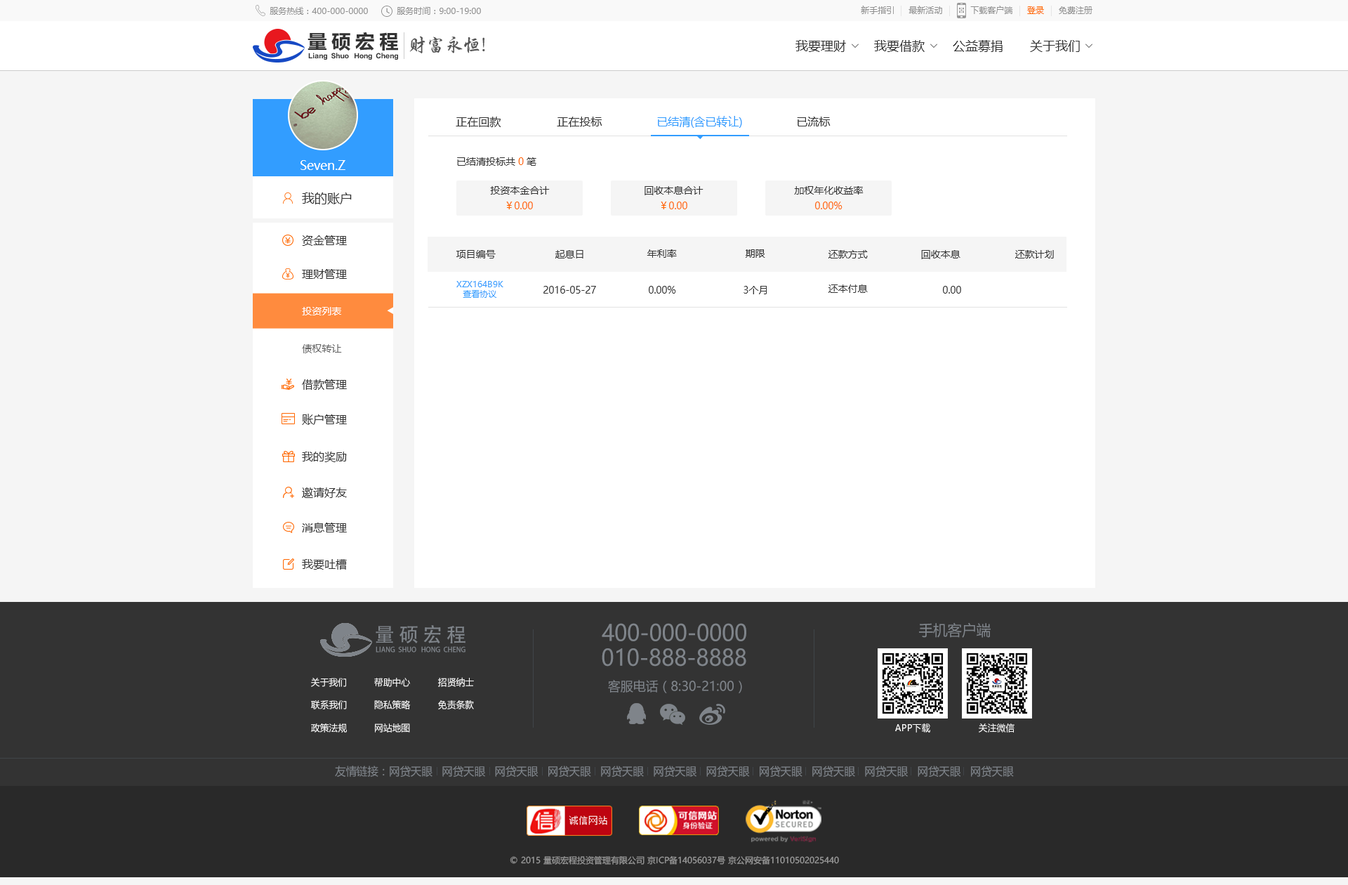
<style>
.page{position:relative;width:1348px;height:885px;background:#ffffff}
.page>*{position:absolute;margin:0}
.t1{font:8.4px "MicrosoftYaHei";color:#909090}
.t2{font:8.4px "MicrosoftYaHei";color:#ff6803}
.t3{font:20px "FZLTCHJW--GB1-0";letter-spacing:0.2em;color:#333333}
.t4{font:18.7px "Tensentype-BoDangXingKaiJ";color:#555555;scale:0.96 1}
.t5{font:12.6px "MicrosoftYaHei";color:#333333}
.t6{font:6.3px "FZLTDHK--GBK1-0";color:#333333;scale:0.96 1}
.t7{font:11.2px "MicrosoftYaHei";color:#333333}
.t8{font:11.2px "MicrosoftYaHei";color:#329dff}
.t9{font:12.6px "MicrosoftYaHei";color:#ffffff}
.t10{font:9.8px "MicrosoftYaHei";color:#333333}
.t11{font:9.8px "MicrosoftYaHei";color:#ff6803}
.t12{font:8.4px/9.8px "MicrosoftYaHei";color:#329dff}
.t13{font:9.8px "MicrosoftYaHei";color:#ffffff}
.t14{font:9.8px "MicrosoftYaHei";color:#646464}
.t15{font:20px "AdobeHeitiStd-Regular";letter-spacing:0.2em;color:#7f848a}
.t16{font:22.4px "MicrosoftYaHei";color:#7f848a;scale:0.96 1}
.t17{font:14.9px "MicrosoftYaHei";color:#7f848a;scale:0.96 1}
.t18{font:7.1px "AdobeHeitiStd-Regular";color:#7f848a;text-transform:uppercase;scale:0.96 1}
.t19{font:9.3px "MicrosoftYaHei";color:#ffffff;scale:0.96 1}
.t20{font:13.1px "MicrosoftYaHei";color:#7f848a;scale:0.96 1}
.t21{font:11.2px "MicrosoftYaHei";color:#7f848a;scale:0.96 1}
.t22{font:8.4px "MicrosoftYaHei";color:#999999}
</style>
<div class="page">
<p class="t1" style="left:861px;top:6px;width:33px;height:8px">新手指引</p>
<p class="t1" style="left:908px;top:6px;width:34px;height:8px">最新活动</p>
<p class="t1" style="left:970px;top:6px;width:43px;height:8px">下载客户端</p>
<p class="t1" style="left:270px;top:7px;width:98px;height:8px">服务热线：400-000-0000</p>
<p class="t1" style="left:397px;top:7px;width:84px;height:8px">服务时间：9:00-19:00</p>
<p class="t2" style="left:1027px;top:6px;width:17px;height:8px">登录</p>
<p class="t1" style="left:1059px;top:6px;width:33px;height:8px">免费注册</p>
<p class="t3" style="left:308px;top:32px;width:90px;height:19px">量硕宏程</p>
<p class="t4" style="left:409px;top:36px;width:76px;height:17px">财富永恒!</p>
<p class="t5" style="left:795px;top:40px;width:51px;height:12px">我要理财</p>
<p class="t5" style="left:874px;top:40px;width:51px;height:12px">我要借款</p>
<p class="t5" style="left:953px;top:40px;width:50px;height:12px">公益募捐</p>
<p class="t5" style="left:1030px;top:40px;width:50px;height:12px">关于我们</p>
<p class="t6" style="left:308px;top:53px;width:90px;height:7px">Liang  Shuo   Hong  Cheng</p>
<p class="t7" style="left:456px;top:117px;width:45px;height:10px">正在回款</p>
<p class="t7" style="left:557px;top:117px;width:45px;height:10px">正在投标</p>
<p class="t8" style="left:657px;top:116px;width:85px;height:12px">已结清(含已转让)</p>
<p class="t7" style="left:797px;top:117px;width:34px;height:9px">已流标</p>
<p class="t9" style="left:300px;top:160px;width:45px;height:10px">Seven.Z</p>
<p class="t10" style="left:457px;top:157px;width:79px;height:9px">已结清投标共 <span class="t11">0</span> 笔</p>
<p class="t5" style="left:302px;top:192px;width:50px;height:12px">我的账户</p>
<p class="t10" style="left:490px;top:186px;width:60px;height:8px">投资本金合计</p>
<p class="t10" style="left:645px;top:186px;width:58px;height:9px">回收本息合计</p>
<p class="t10" style="left:794px;top:186px;width:70px;height:8px">加权年化收益率</p>
<p class="t11" style="left:506px;top:201px;width:27px;height:8px">￥0.00</p>
<p class="t11" style="left:661px;top:201px;width:26px;height:8px">￥0.00</p>
<p class="t11" style="left:815px;top:201px;width:27px;height:8px">0.00%</p>
<p class="t7" style="left:302px;top:235px;width:45px;height:11px">资金管理</p>
<p class="t10" style="left:456px;top:250px;width:40px;height:8px">项目编号</p>
<p class="t10" style="left:555px;top:250px;width:28px;height:8px">起息日</p>
<p class="t10" style="left:647px;top:249px;width:30px;height:9px">年利率</p>
<p class="t10" style="left:746px;top:249px;width:19px;height:9px">期限</p>
<p class="t10" style="left:828px;top:250px;width:40px;height:8px">还款方式</p>
<p class="t10" style="left:921px;top:250px;width:39px;height:9px">回收本息</p>
<p class="t10" style="left:1015px;top:250px;width:39px;height:8px">还款计划</p>
<p class="t7" style="left:302px;top:269px;width:45px;height:10px">理财管理</p>
<p class="t12" style="left:456px;top:281px;width:47px;height:17px;text-align:center">XZX164B9K<br>查看协议</p>
<p class="t10" style="left:543px;top:286px;width:53px;height:7px">2016-05-27</p>
<p class="t10" style="left:649px;top:286px;width:27px;height:7px">0.00%</p>
<p class="t10" style="left:743px;top:286px;width:24px;height:8px">3个月</p>
<p class="t10" style="left:828px;top:284px;width:40px;height:9px">还本付息</p>
<p class="t10" style="left:943px;top:286px;width:18px;height:7px">0.00</p>
<p class="t13" style="left:302px;top:307px;width:39px;height:8px">投资列表</p>
<p class="t14" style="left:302px;top:344px;width:40px;height:9px">债权转让</p>
<p class="t7" style="left:302px;top:379px;width:45px;height:11px">借款管理</p>
<p class="t7" style="left:302px;top:414px;width:45px;height:11px">账户管理</p>
<p class="t7" style="left:302px;top:451px;width:45px;height:11px">我的奖励</p>
<p class="t7" style="left:302px;top:487px;width:45px;height:11px">邀请好友</p>
<p class="t7" style="left:302px;top:522px;width:45px;height:10px">消息管理</p>
<p class="t7" style="left:302px;top:559px;width:45px;height:10px">我要吐槽</p>
<p class="t15" style="left:376px;top:625px;width:89px;height:18px">量硕宏程</p>
<p class="t16" style="left:602px;top:623px;width:144px;height:18px">400-000-0000</p>
<p class="t17" style="left:919px;top:622px;width:72px;height:15px">手机客户端</p>
<p class="t18" style="left:376px;top:646px;width:89px;height:6px">Liang  Shuo   Hong  Cheng</p>
<p class="t16" style="left:602px;top:648px;width:144px;height:18px">010-888-8888</p>
<p class="t19" style="left:311px;top:677px;width:35px;height:10px">关于我们</p>
<p class="t19" style="left:374px;top:677px;width:36px;height:10px">帮助中心</p>
<p class="t19" style="left:438px;top:677px;width:36px;height:10px">招贤纳士</p>
<p class="t20" style="left:608px;top:680px;width:134px;height:13px">客服电话（8:30-21:00）</p>
<p class="t19" style="left:311px;top:700px;width:36px;height:9px">联系我们</p>
<p class="t19" style="left:374px;top:700px;width:37px;height:9px">隐私策略</p>
<p class="t19" style="left:438px;top:700px;width:36px;height:9px">免责条款</p>
<p class="t19" style="left:311px;top:723px;width:36px;height:9px">政策法规</p>
<p class="t19" style="left:375px;top:723px;width:35px;height:9px">网站地图</p>
<p class="t19" style="left:895px;top:723px;width:35px;height:9px">APP下载</p>
<p class="t19" style="left:979px;top:723px;width:35px;height:9px">关注微信</p>
<p class="t21" style="left:335px;top:765px;width:679px;height:11px">友情链接：网贷天眼   网贷天眼   网贷天眼   网贷天眼   网贷天眼   网贷天眼   网贷天眼   网贷天眼   网贷天眼   网贷天眼   网贷天眼   网贷天眼</p>
<p class="t22" style="left:510px;top:855px;width:329px;height:9px">© 2015 量硕宏程投资管理有限公司 京ICP备14056037号 京公网安备11010502025440</p>
</div>
